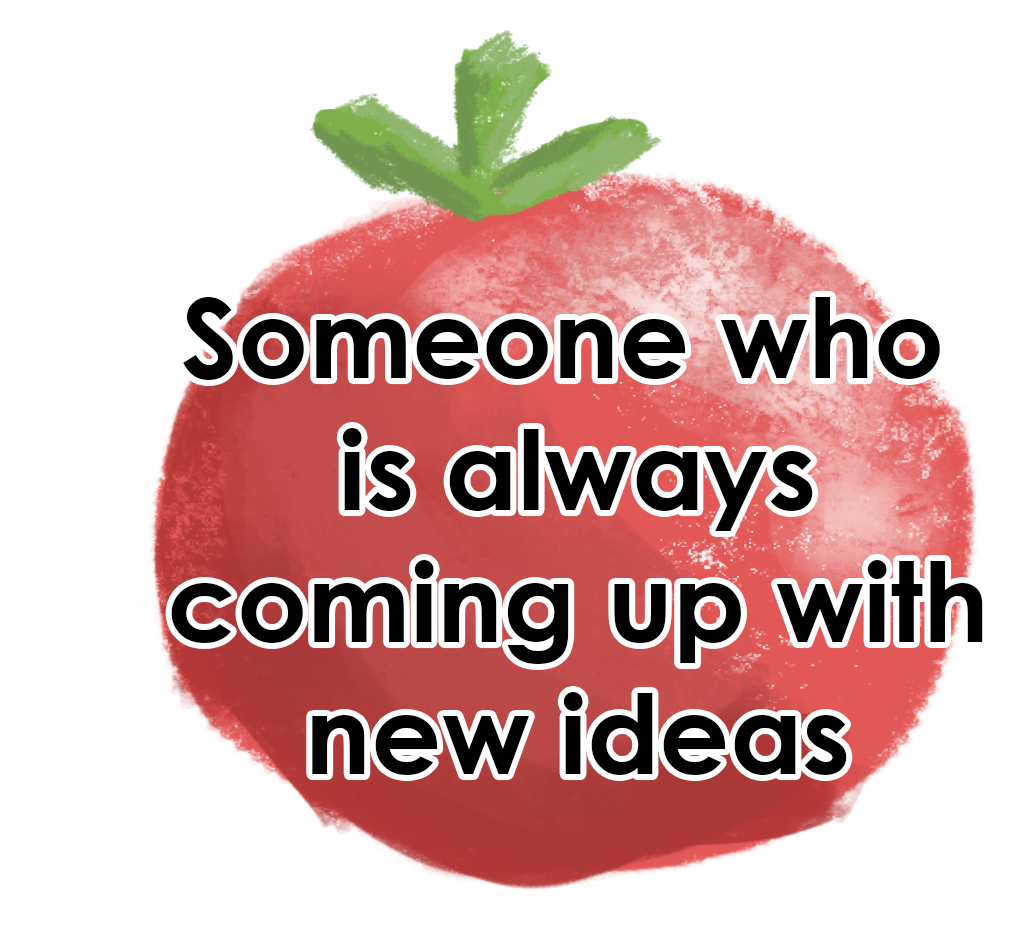
<style>
.page{position:relative;width:1032px;height:948px;background:#ffffff}
.page>*{position:absolute;margin:0}
.t1{font:110px "CenturyGothic-Bold";color:#000000}
</style>
<div class="page">
<p class="t1" style="left:171px;top:297px;width:812px;height:478px;text-align:center">Someone who<br> is always<br> coming up with<br> new ideas</p>
</div>
